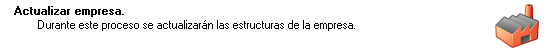
<style>
.page{position:relative;width:552px;height:52px;background:#ffffff}
.page>*{position:absolute;margin:0}
.t1{font:11.4px "MS Sans Serif";color:#000000;font-weight:bold}
.t2{font:11.4px "MS Sans Serif";color:#000000}
</style>
<div class="page">
<p class="t1" style="left:14px;top:6px;width:110px;height:11px">Actualizar empresa.</p>
<p class="t2" style="left:38px;top:20px;width:317px;height:11px">Durante este proceso se actualizarán las estructuras de la empresa.</p>
</div>
